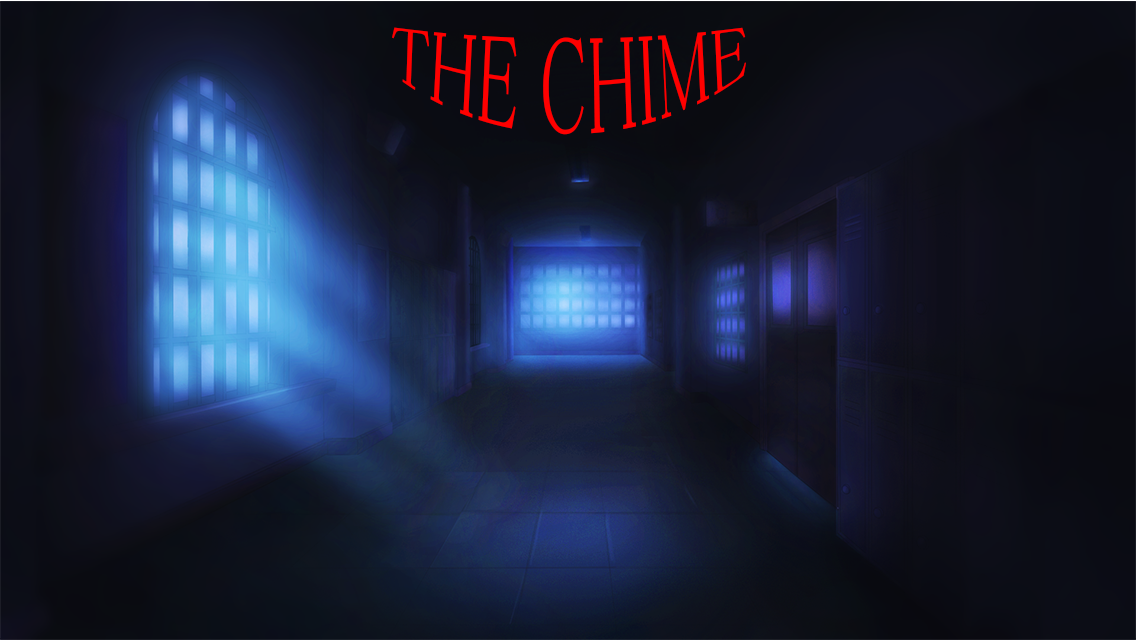
<style>
.page{position:relative;width:1136px;height:640px}
.page>*{position:absolute;margin:0}
.t1{font:66.7px "MS-PMincho";color:#ff0000}
</style>
<div class="page">
<p class="t1" style="left:392px;top:27px;width:354px;height:108px;rotate:-90deg">THE CHIME</p>
</div>
